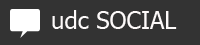
<style>
.page{position:relative;width:200px;height:45px;background:#333333}
.page>*{position:absolute;margin:0}
.t1{font:24px "Tahoma";color:#fdfafa}
</style>
<div class="page">
<p class="t1" style="left:52px;top:10px;width:125px;height:19px">udc SOCIAL</p>
</div>
